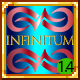
<style>
.page{position:relative;width:80px;height:80px}
.page>*{position:absolute;margin:0}
.t1{font:12px "TrajanColor-Concept";letter-spacing:-0.075em}
.t2{font:16px "MyriadPro-Regular";letter-spacing:-0.05em;color:#000000}
</style>
<div class="page">
<p class="t1" style="left:6px;top:35px;width:69px;height:11px">Infinitum</p>
<p class="t2" style="left:59px;top:61px;width:15px;height:11px">1.4</p>
</div>
